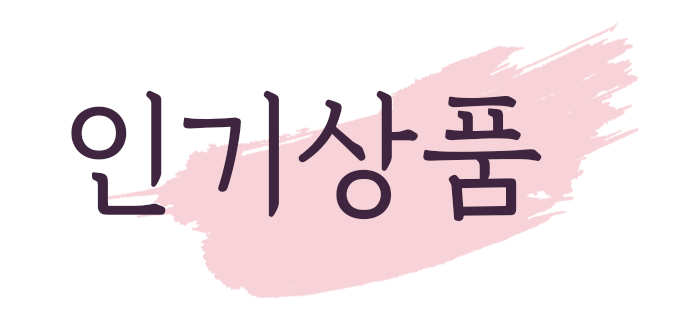
<style>
.page{position:relative;width:683px;height:311px;background:#ffffff}
.page>*{position:absolute;margin:0}
.t1{font:131.1px "GyeonggiBatangR";color:#3f253f;font-weight:bold}
</style>
<div class="page">
<p class="t1" style="left:71px;top:90px;width:471px;height:131px">인기상품</p>
</div>
